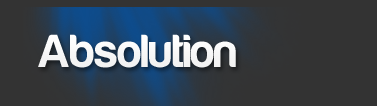
<style>
.page{position:relative;width:377px;height:106px;background:#333333}
.page>*{position:absolute;margin:0}
.t1{font:48px "Harabara-Bold";color:#ffffff}
</style>
<div class="page">
<p class="t1" style="left:38px;top:34px;width:198px;height:34px">Absolution</p>
</div>
